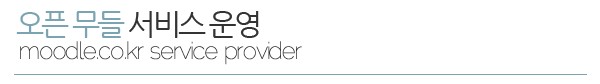
<style>
.page{position:relative;width:600px;height:84px;background:#ffffff}
.page>*{position:absolute;margin:0}
.t1{font:30px "NanumGothic";letter-spacing:-0.1em;color:#333333}
.t2{font:30px "NanumGothic";letter-spacing:-0.1em;color:#7ba4b3}
.t3{font:24px "Raleway-Thin";letter-spacing:-0.05em;color:#333333}
</style>
<div class="page">
<p class="t1" style="left:16px;top:11px;width:243px;height:27px"><span class="t2">오픈 무들</span> 서비스 운영</p>
<p class="t3" style="left:20px;top:41px;width:282px;height:24px">moodle.co.kr service provider</p>
</div>
